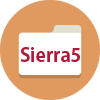
<style>
.page{position:relative;width:100px;height:100px;background:#e0995e}
.page>*{position:absolute;margin:0}
.t1{font:18.4px "AdobeGothicStd-Bold";color:#b01a3a}
</style>
<div class="page">
<p class="t1" style="left:20px;top:47px;width:60px;height:15px">Sierra5</p>
</div>
